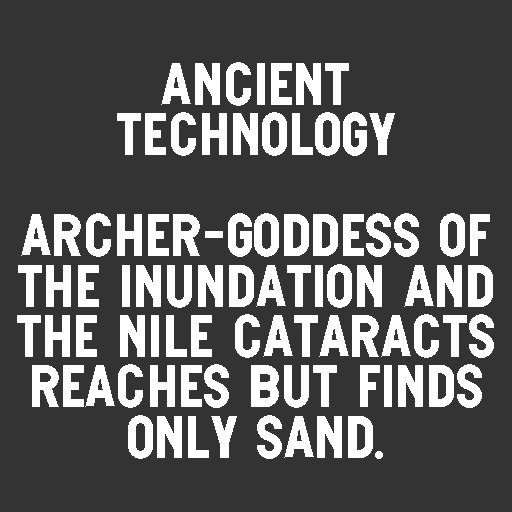
<style>
.page{position:relative;width:512px;height:512px;background:#333333}
.page>*{position:absolute;margin:0}
.t1{font:42px "NTCornelia-Regular";color:#fffefe}
</style>
<div class="page">
<p class="t1" style="left:17px;top:62px;width:477px;height:397px;text-align:center">ANCIENT<br>Technology<br><br>Archer-Goddess of the Inundation and<br>the Nile Cataracts reaches but finds<br>only sand.</p>
</div>
